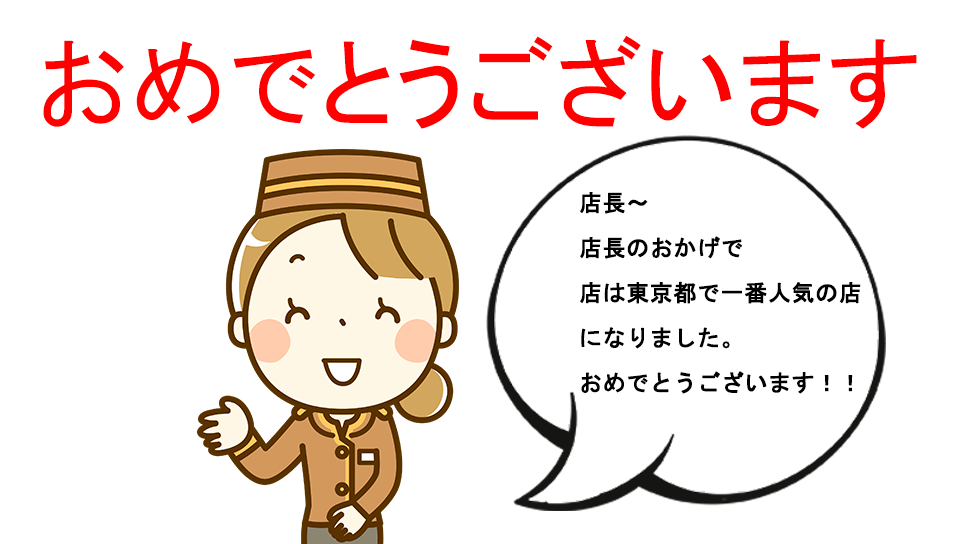
<style>
.page{position:relative;width:960px;height:544px;background:#ffffff}
.page>*{position:absolute;margin:0}
.t1{font:100px "MS-PGothic";color:#ff0000}
.t2{font:23px/45px "MS-Gothic";color:#000000;font-weight:bold}
</style>
<div class="page">
<p class="t1" style="left:43px;top:35px;width:874px;height:94px">おめでとうございます</p>
<p class="t2" style="left:580px;top:192px;width:281px;height:202px">店長～<br>店長のおかげで<br>店は東京都で一番人気の店<br>になりました。<br>おめでとうございます！！</p>
</div>
